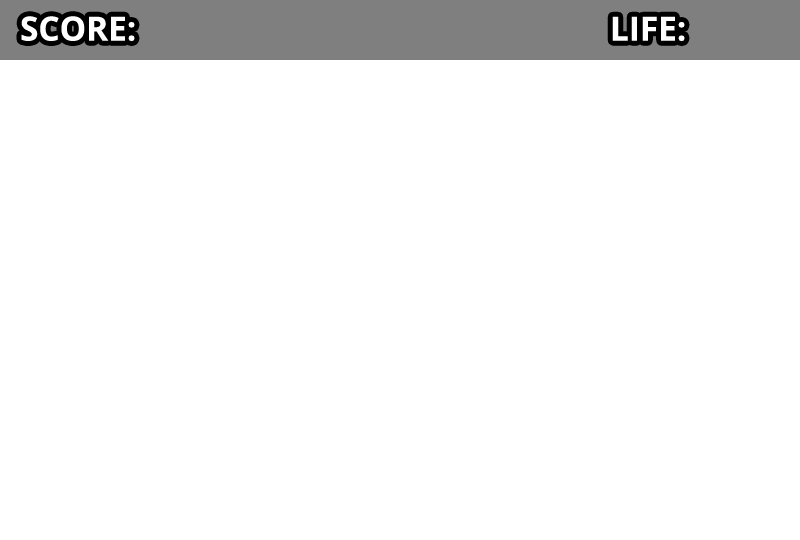
<style>
.page{position:relative;width:800px;height:540px;background:#ffffff}
.page>*{position:absolute;margin:0}
.t1{font:33.3px "OpenSans-Bold";color:#ffffff}
</style>
<div class="page">
<p class="t1" style="left:21px;top:16px;width:114px;height:26px">SCORE:</p>
<p class="t1" style="left:612px;top:16px;width:73px;height:26px">LIFE:</p>
</div>
